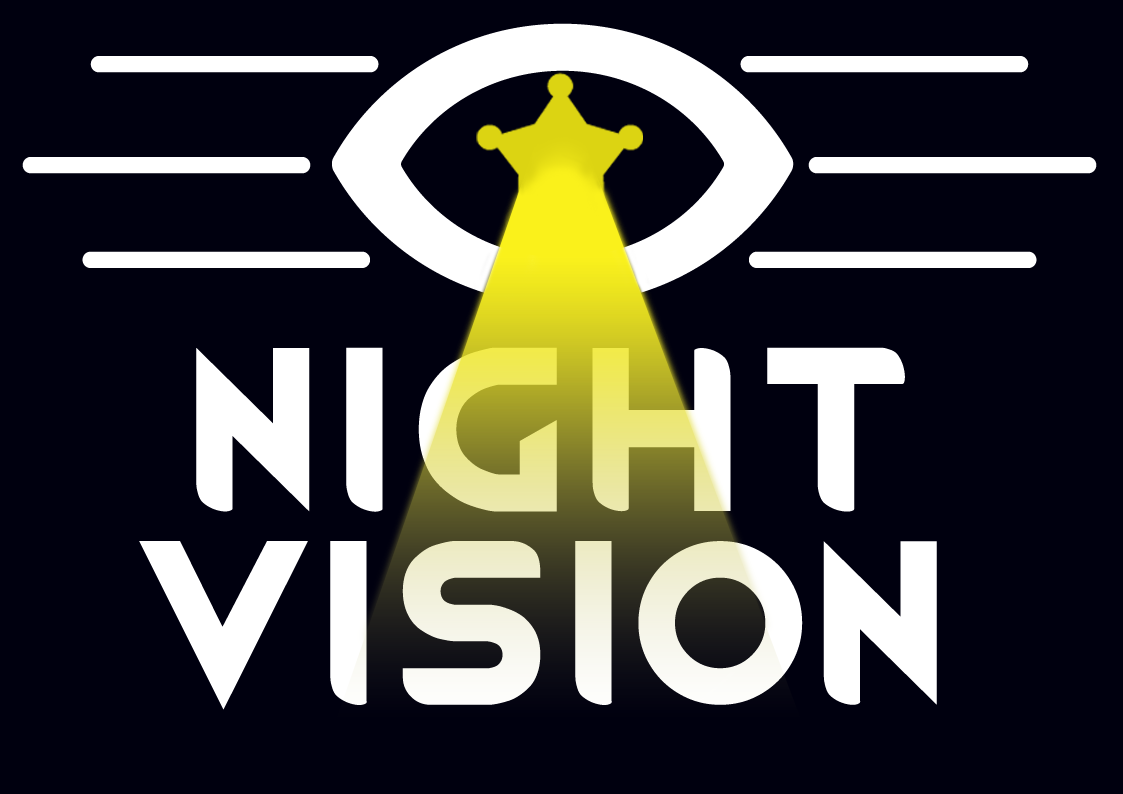
<style>
.page{position:relative;width:1123px;height:794px;background:#00000f}
.page>*{position:absolute;margin:0}
.t1{font:197.9px/193.4px "RimWordFont";color:#ffffff}
</style>
<div class="page">
<p class="t1" style="left:139px;top:347px;width:798px;height:363px;text-align:center">night<br>vision</p>
</div>
